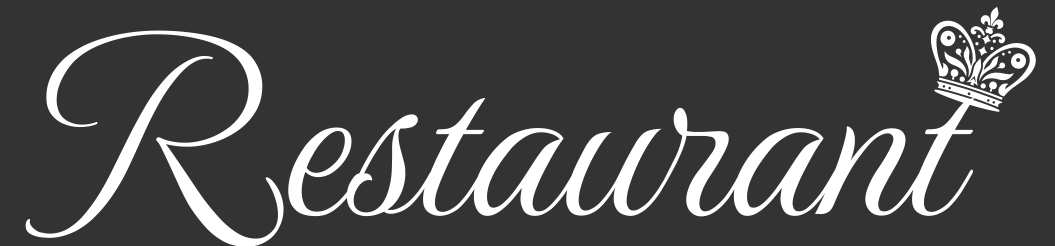
<style>
.page{position:relative;width:1055px;height:246px;background:#333333}
.page>*{position:absolute;margin:0}
.t1{font:261.8px "MonteCarlo-Regular";color:#ffffff}
</style>
<div class="page">
<p class="t1" style="left:25px;top:30px;width:950px;height:217px">Restaurant</p>
</div>
